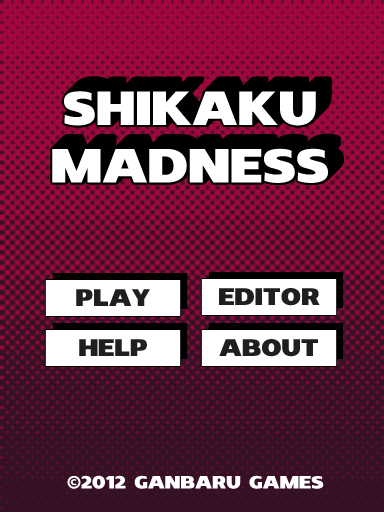
<style>
.page{position:relative;width:384px;height:512px;background:#341125}
.page>*{position:absolute;margin:0}
.t1{font:48px "Insolent";color:#ffffff;text-transform:uppercase}
.t2{font:48px "Insolent";text-transform:uppercase}
.t3{font:24px "Insolent";color:#1f1f1f;text-transform:uppercase}
.t4{font:18px "Insolent";color:#ffffff;text-transform:uppercase}
</style>
<div class="page">
<p class="t1" style="left:54px;top:89px;width:276px;height:92px;text-align:center">Shikaku<br>madness</p>
<p class="t1" style="left:55px;top:88px;width:276px;height:92px;text-align:center">Shikaku<br>madness</p>
<p class="t1" style="left:55px;top:89px;width:276px;height:92px;text-align:center">Shikaku<br>madness</p>
<p class="t1" style="left:56px;top:87px;width:276px;height:92px;text-align:center">Shikaku<br>madness</p>
<p class="t1" style="left:56px;top:88px;width:276px;height:92px;text-align:center">Shikaku<br>madness</p>
<p class="t2" style="left:57px;top:87px;width:276px;height:92px;text-align:center">Shikaku<br>madness</p>
<p class="t1" style="left:52px;top:91px;width:276px;height:92px;text-align:center">Shikaku<br>madness</p>
<p class="t1" style="left:53px;top:90px;width:276px;height:92px;text-align:center">Shikaku<br>madness</p>
<p class="t1" style="left:53px;top:91px;width:276px;height:92px;text-align:center">Shikaku<br>madness</p>
<p class="t1" style="left:54px;top:90px;width:276px;height:92px;text-align:center">Shikaku<br>madness</p>
<p class="t3" style="left:76px;top:289px;width:74px;height:17px">play</p>
<p class="t3" style="left:219px;top:288px;width:101px;height:18px">Editor</p>
<p class="t3" style="left:79px;top:339px;width:68px;height:17px">help</p>
<p class="t3" style="left:219px;top:339px;width:99px;height:18px">about</p>
<p class="t4" style="left:67px;top:475px;width:257px;height:14px">©2012 ganbaru games</p>
</div>
